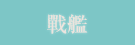
<style>
.page{position:relative;width:135px;height:45px;background:#7dc6c6}
.page>*{position:absolute;margin:0}
.t1{font:21px "RyuminPro-Medium";color:#f4e6df}
</style>
<div class="page">
<p class="t1" style="left:47px;top:14px;width:41px;height:20px">戰艦</p>
</div>
